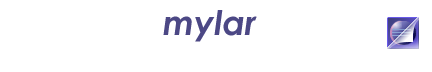
<style>
.page{position:relative;width:432px;height:72px;background:#ffffff}
.page>*{position:absolute;margin:0}
.t1{font:34px "CenturyGothic-BoldItalic";color:#4c4885}
</style>
<div class="page">
<p class="t1" style="left:163px;top:10px;width:94px;height:32px">mylar</p>
</div>
